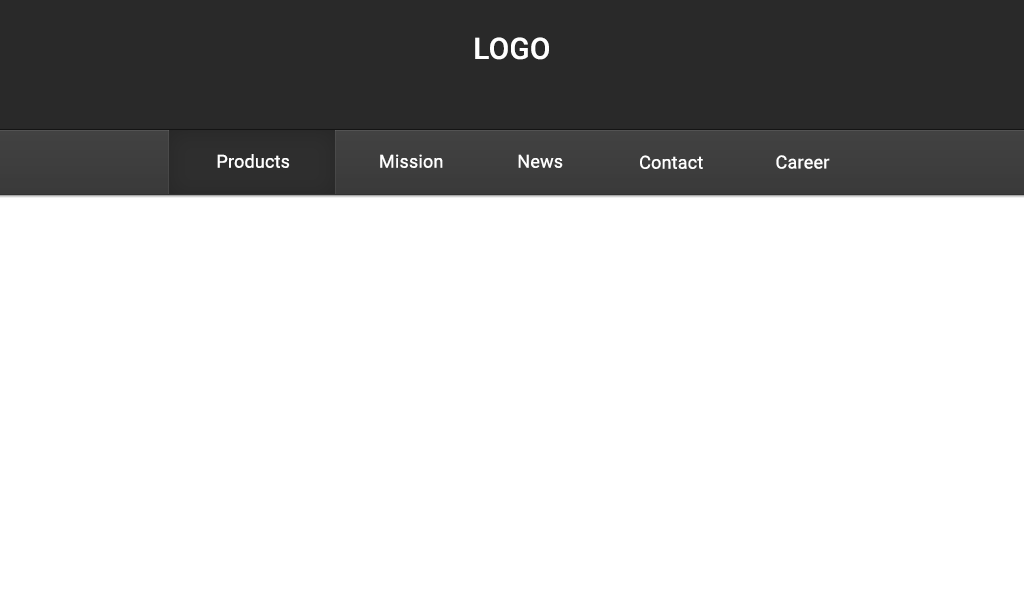
<style>
.page{position:relative;width:1024px;height:600px;background:#ffffff}
.page>*{position:absolute;margin:0}
.t1{font:29.6px "Roboto-Medium";letter-spacing:0.01em;color:#ffffff}
.t2{font:18px "Roboto-Regular";letter-spacing:0.01em;color:#ffffff}
</style>
<div class="page">
<p class="t1" style="left:475px;top:37px;width:74px;height:23px">LOGO</p>
<p class="t2" style="left:217px;top:154px;width:73px;height:14px">Products</p>
<p class="t2" style="left:380px;top:154px;width:63px;height:14px">Mission</p>
<p class="t2" style="left:518px;top:154px;width:45px;height:14px">News</p>
<p class="t2" style="left:640px;top:155px;width:63px;height:14px">Contact</p>
<p class="t2" style="left:776px;top:155px;width:54px;height:14px">Career</p>
</div>
